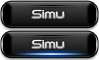
<style>
.page{position:relative;width:99px;height:60px}
.page>*{position:absolute;margin:0}
.t1{font:11.7px "Downlink";color:#dcdcdc}
</style>
<div class="page">
<p class="t1" style="left:32px;top:9px;width:33px;height:10px">Simu</p>
<p class="t1" style="left:32px;top:39px;width:33px;height:10px">Simu</p>
</div>
